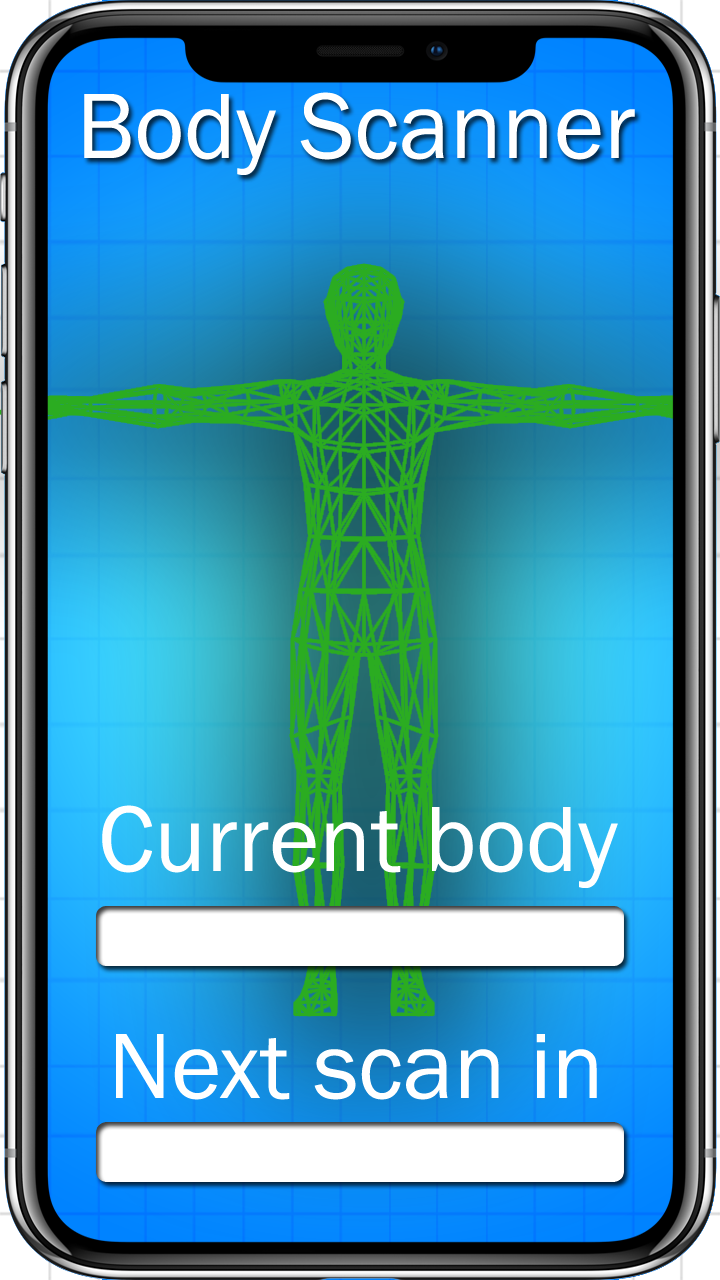
<style>
.page{position:relative;width:720px;height:1280px}
.page>*{position:absolute;margin:0}
.t1{font:96px "FranklinGothic-Book";color:#ffffff}
</style>
<div class="page">
<p class="t1" style="left:84px;top:92px;width:551px;height:83px">Body Scanner</p>
<p class="t1" style="left:102px;top:805px;width:516px;height:83px">Current body</p>
<p class="t1" style="left:116px;top:1034px;width:481px;height:66px">Next scan in</p>
</div>
